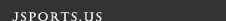
<style>
.page{position:relative;width:226px;height:21px;background:#333333}
.page>*{position:absolute;margin:0}
.t1{font:12px "Castellar";letter-spacing:0.16em;color:#ffffff}
</style>
<div class="page">
<p class="t1" style="left:12px;top:12px;width:90px;height:10px">Jsports.us</p>
</div>
